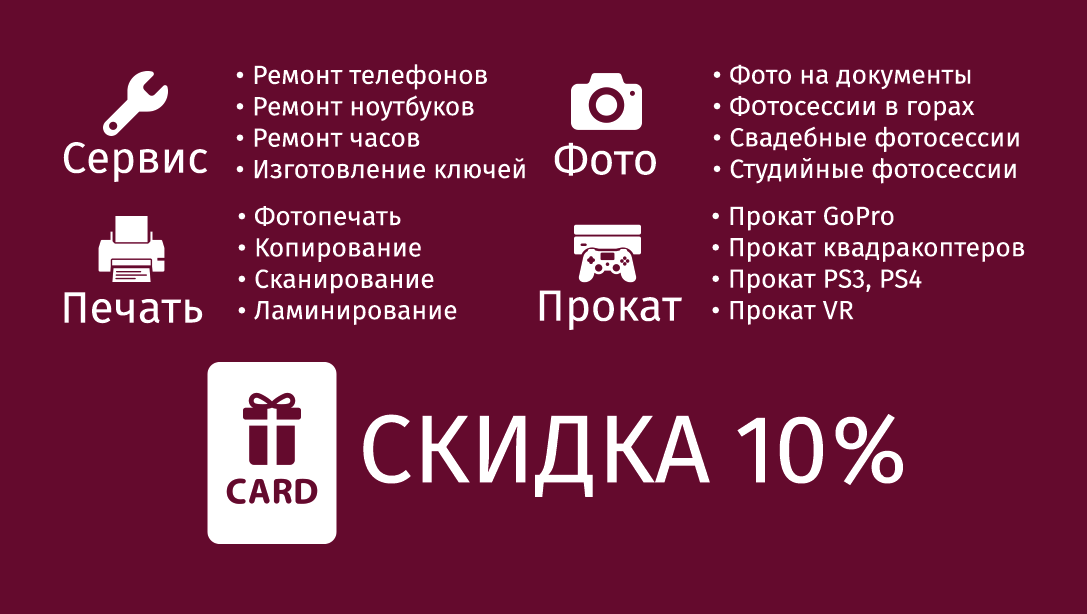
<style>
.page{position:relative;width:1087px;height:614px;background:#640a2d}
.page>*{position:absolute;margin:0}
.t1{font:26.2px "FiraSans";color:#ffffff}
.t2{font:43.6px "FiraSans";color:#ffffff}
.t3{font:96.5px "FiraSans";color:#ffffff}
</style>
<div class="page">
<p class="t1" style="left:236px;top:64px;width:289px;height:115px">• Ремонт телефонов<br>• Ремонт ноутбуков<br>• Ремонт часов<br>• Изготовление ключей</p>
<p class="t1" style="left:713px;top:64px;width:306px;height:120px">• Фото на документы<br>• ФОтосессии в горах<br>• Свадебные фотосессии<br>• Студийные фотосессии</p>
<p class="t2" style="left:63px;top:142px;width:145px;height:40px">Сервис</p>
<p class="t2" style="left:554px;top:142px;width:102px;height:34px">Фото</p>
<p class="t1" style="left:238px;top:206px;width:219px;height:119px">• Фотопечать<br>• Копирование<br>• Сканирование<br>• Ламинирование</p>
<p class="t1" style="left:712px;top:206px;width:313px;height:119px">• Прокат GoPro<br>• Прокат квадракоптеров<br>• Прокат PS3, PS4<br>• Прокат VR</p>
<p class="t2" style="left:64px;top:292px;width:139px;height:32px">Печать</p>
<p class="t2" style="left:539px;top:290px;width:143px;height:40px">Прокат</p>
<p class="t3" style="left:363px;top:414px;width:540px;height:83px">СКИДКА 10%</p>
</div>
